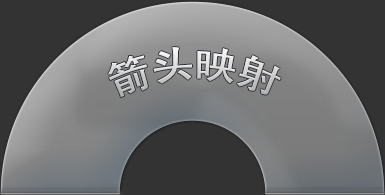
<style>
.page{position:relative;width:385px;height:195px;background:#333333}
.page>*{position:absolute;margin:0}
.t1{font:37.5px "AdobeHeitiStd-Regular";color:#d9d9d9}
</style>
<div class="page">
<p class="t1" style="left:108px;top:47px;width:173px;height:51px">箭头映射</p>
</div>
